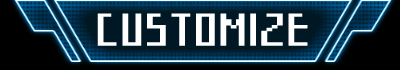
<style>
.page{position:relative;width:400px;height:70px}
.page>*{position:absolute;margin:0}
.t1{font:42.4px "Starcadia";letter-spacing:-0.005em;color:#ffffff;font-weight:bold;scale:0.9 1}
</style>
<div class="page">
<p class="t1" style="left:97px;top:13px;width:211px;height:33px">CUSTOMIZE</p>
</div>
